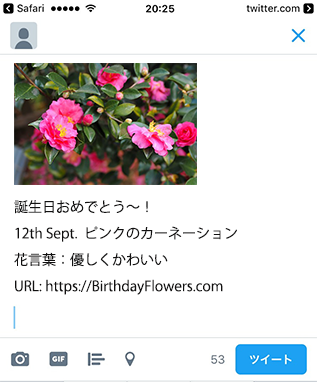
<style>
.page{position:relative;width:317px;height:382px;background:#ffffff}
.page>*{position:absolute;margin:0}
.t1{font:14px/26.4px "KozGoPr6N-Regular";color:#111010}
</style>
<div class="page">
<p class="t1" style="left:14px;top:200px;width:223px;height:95px">誕生日おめでとう～！<br>12th Sept.  ピンクのカーネーション<br>花言葉：優しくかわいい<br>URL: https://BirthdayFlowers.com</p>
</div>
